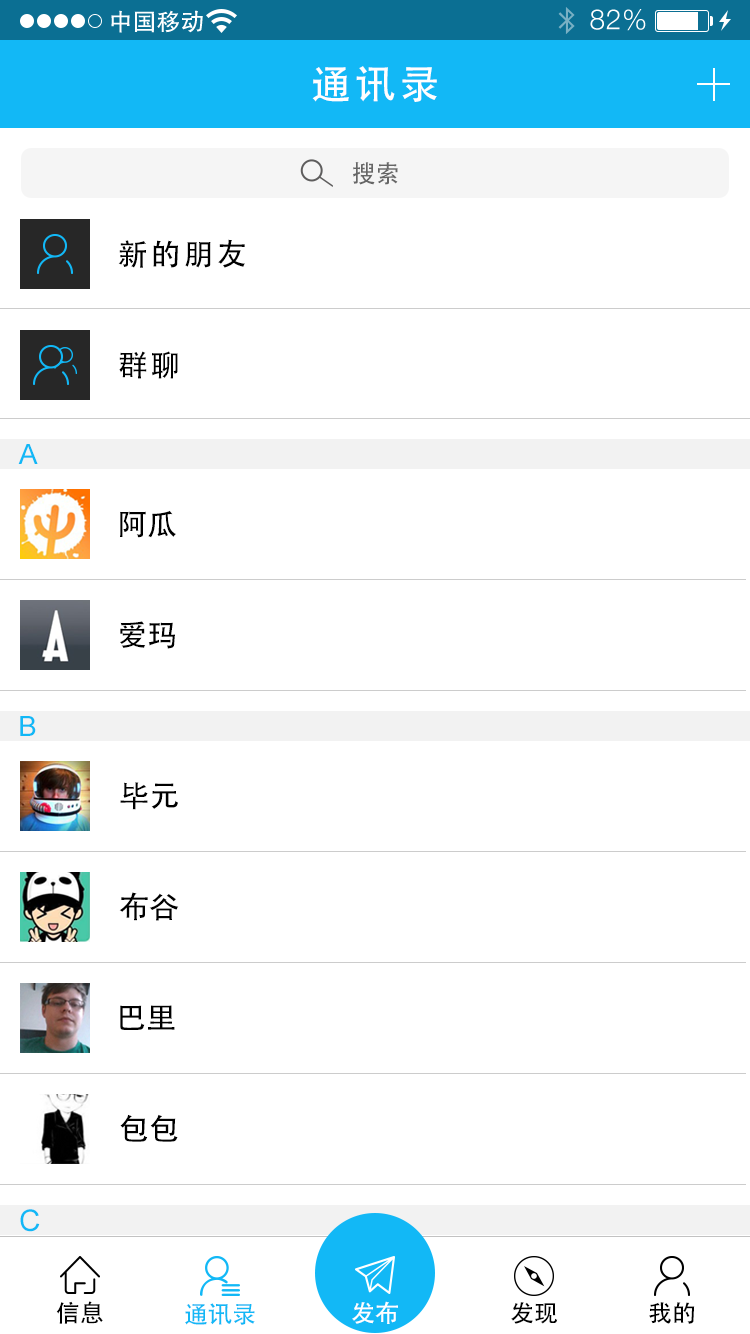
<style>
.page{position:relative;width:750px;height:1334px;background:#ffffff}
.page>*{position:absolute;margin:0}
.t1{font:40px "AdobeHeitiStd-Regular";letter-spacing:0.104em;color:#fffefe}
.t2{font:24px "AdobeHeitiStd-Regular";color:#666666}
.t3{font:30px "AdobeHeitiStd-Regular";letter-spacing:0.104em;color:#000000}
.t4{font:28px "ArialMT";letter-spacing:0.01em;color:#12b8f6}
.t5{font:30px "AdobeHeitiStd-Regular";letter-spacing:0.01em;color:#000000}
.t6{font:30px "ArialMT";letter-spacing:0.01em;color:#12b8f6}
.t7{font:24px "AdobeHeitiStd-Regular";color:#000000}
.t8{font:24px "AdobeHeitiStd-Regular";color:#ffffff}
.t9{font:24px "AdobeHeitiStd-Regular";color:#12b8f6}
</style>
<div class="page">
<p class="t1" style="left:312px;top:66px;width:125px;height:36px">通讯录</p>
<p class="t2" style="left:353px;top:162px;width:45px;height:23px">搜索</p>
<p class="t3" style="left:118px;top:239px;width:127px;height:29px">新的朋友</p>
<p class="t3" style="left:119px;top:351px;width:59px;height:28px">群聊</p>
<p class="t4" style="left:18px;top:444px;width:20px;height:20px">A</p>
<p class="t5" style="left:120px;top:510px;width:56px;height:28px">阿瓜</p>
<p class="t5" style="left:120px;top:621px;width:55px;height:28px">爱玛</p>
<p class="t4" style="left:20px;top:716px;width:16px;height:20px">B</p>
<p class="t5" style="left:120px;top:782px;width:58px;height:28px">毕元</p>
<p class="t5" style="left:119px;top:892px;width:60px;height:29px">布谷</p>
<p class="t5" style="left:120px;top:1005px;width:55px;height:25px">巴里</p>
<p class="t5" style="left:120px;top:1114px;width:58px;height:28px">包包</p>
<p class="t6" style="left:20px;top:1209px;width:20px;height:23px">C</p>
<p class="t7" style="left:56px;top:1301px;width:47px;height:23px">信息</p>
<p class="t8" style="left:352px;top:1301px;width:46px;height:23px">发布</p>
<p class="t7" style="left:511px;top:1302px;width:47px;height:22px">发现</p>
<p class="t7" style="left:649px;top:1302px;width:46px;height:22px">我的</p>
<p class="t9" style="left:185px;top:1303px;width:70px;height:22px">通讯录</p>
</div>
